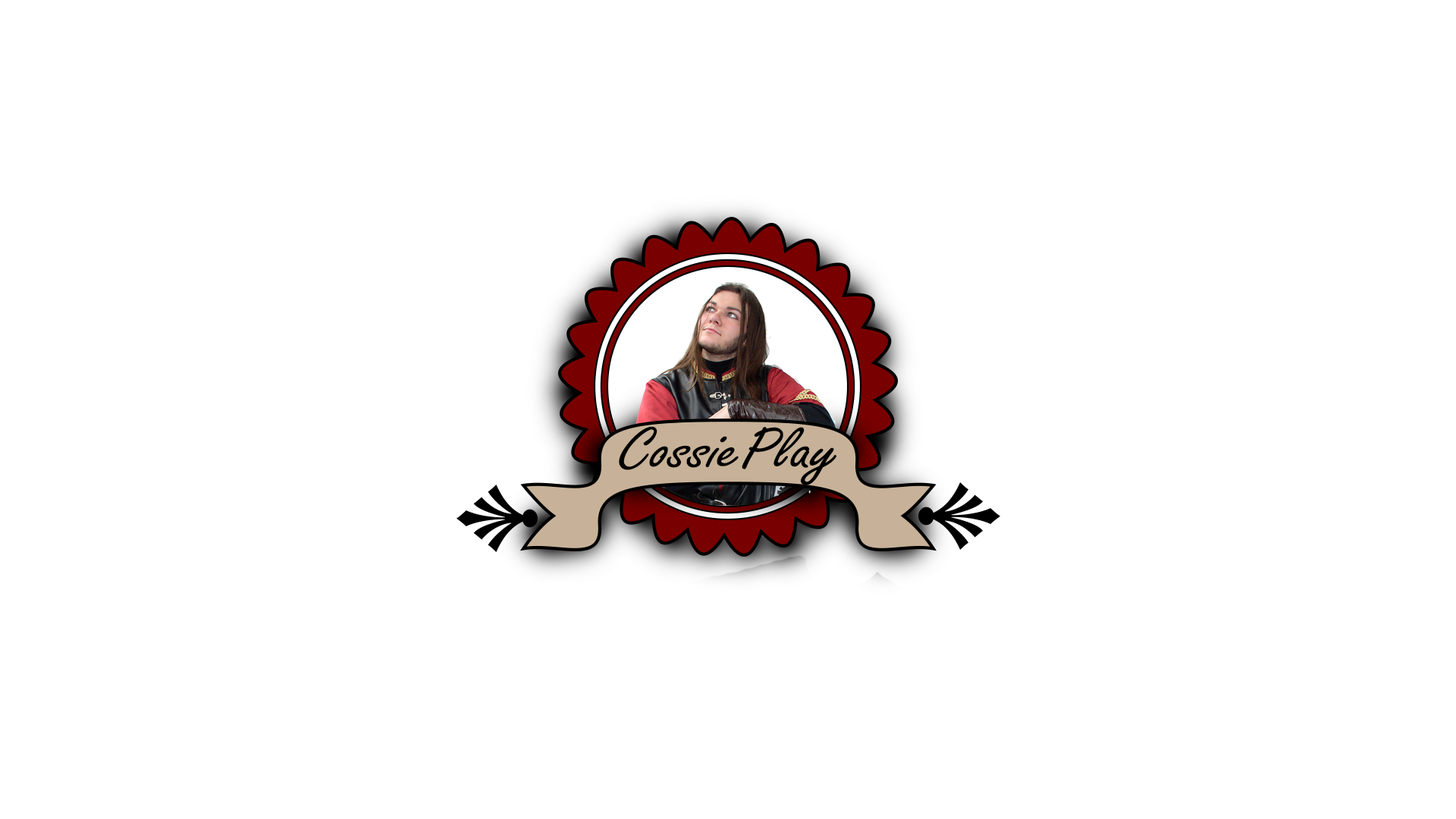
<style>
.page{position:relative;width:1456px;height:819px;background:#ffffff}
.page>*{position:absolute;margin:0}
.t1{font:62.8px "FreestyleScript-Regular";color:#000000;scale:1.24 1}
</style>
<div class="page">
<p class="t1" style="left:619px;top:426px;width:217px;height:59px">CossiePlay</p>
</div>
